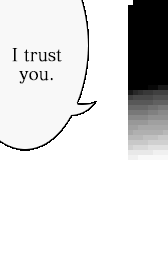
<style>
.page{position:relative;width:168px;height:256px;background:#ffffff}
.page>*{position:absolute;margin:0}
.t1{font:17.6px "MatissePro-M";letter-spacing:-0.005em;color:#000000;font-weight:bold;scale:0.91 1}
</style>
<div class="page">
<p class="t1" style="left:12px;top:48px;width:50px;height:36px;text-align:center">I trust<br>you.</p>
</div>
